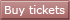
<style>
.page{position:relative;width:70px;height:20px}
.page>*{position:absolute;margin:0}
.t1{font:11px "Verdana";color:#ffffff}
</style>
<div class="page">
<p class="t1" style="left:5px;top:5px;width:60px;height:11px">Buy tickets</p>
</div>
